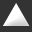
<style>
.page{position:relative;width:32px;height:32px;background:#333333}
.page>*{position:absolute;margin:0}
.t1{font:32px "MS-Gothic";color:#ffffff}
</style>
<div class="page">
<p class="t1" style="left:3px;top:3px;width:27px;height:23px">▲</p>
</div>
